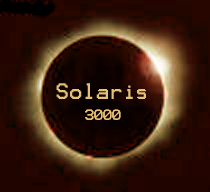
<style>
.page{position:relative;width:210px;height:192px}
.page>*{position:absolute;margin:0}
.t1{font:17.9px "Terminal";color:#e7c075}
.t2{font:12px "Terminal";color:#e7c075}
</style>
<div class="page">
<p class="t1" style="left:56px;top:83px;width:90px;height:37px;text-align:center">Solaris<br><br><span class="t2">3000</span></p>
</div>
